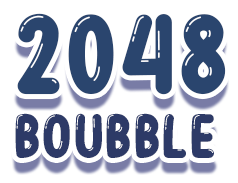
<style>
.page{position:relative;width:238px;height:183px;background:#ffffff}
.page>*{position:absolute;margin:0}
.t1{font:114px "BubbleBobble";color:#2a456e}
.t2{font:63px "BubbleBobble";color:#2d3a67}
</style>
<div class="page">
<p class="t1" style="left:17px;top:13px;width:209px;height:82px">2048</p>
<p class="t2" style="left:15px;top:113px;width:199px;height:45px">BOUBBLE</p>
</div>
